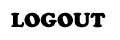
<style>
.page{position:relative;width:120px;height:40px;background:#ffffff}
.page>*{position:absolute;margin:0}
.t1{font:20px "CooperBlackStd";color:#000000}
</style>
<div class="page">
<p class="t1" style="left:11px;top:12px;width:95px;height:16px">LOGOUT</p>
</div>
